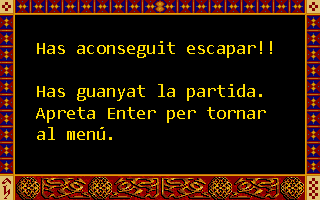
<style>
.page{position:relative;width:320px;height:200px;background:#000000}
.page>*{position:absolute;margin:0}
.t1{font:18px "Consolas";color:#ffde00}
</style>
<div class="page">
<p class="t1" style="left:36px;top:41px;width:236px;height:99px">Has aconseguit escapar!!<br><br>Has guanyat la partida.<br>Apreta Enter per tornar<br>al menú.</p>
</div>
